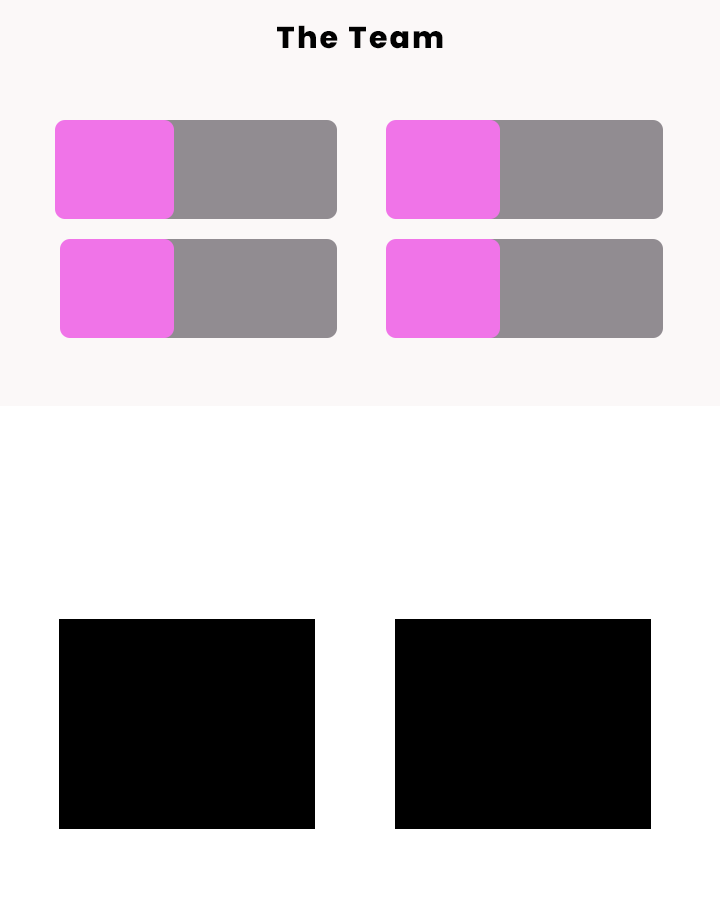
<style>
.page{position:relative;width:720px;height:912px;background:#ffffff}
.page>*{position:absolute;margin:0}
.t1{font:30px "Poppins-ExtraBold";letter-spacing:0.075em;color:#010101}
</style>
<div class="page">
<p class="t1" style="left:277px;top:25px;width:166px;height:24px">The Team</p>
</div>
